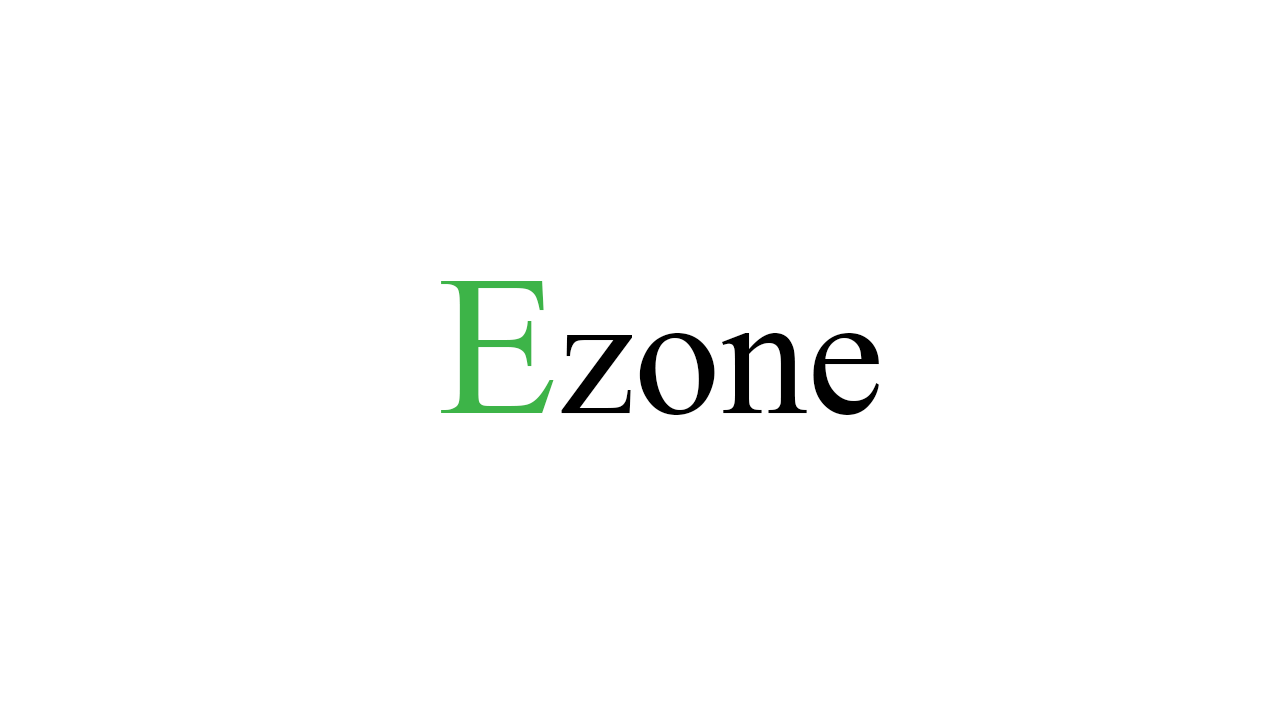
<style>
.page{position:relative;width:1280px;height:720px;background:#ffffff}
.page>*{position:absolute;margin:0}
.t1{font:173px "TimesNewRomanPSMT";color:#000000}
.t2{font:197.7px "TimesNewRomanPSMT";color:#3db448}
</style>
<div class="page">
<p class="t1" style="left:441px;top:281px;width:438px;height:134px"><span class="t2">E</span>zone</p>
</div>
